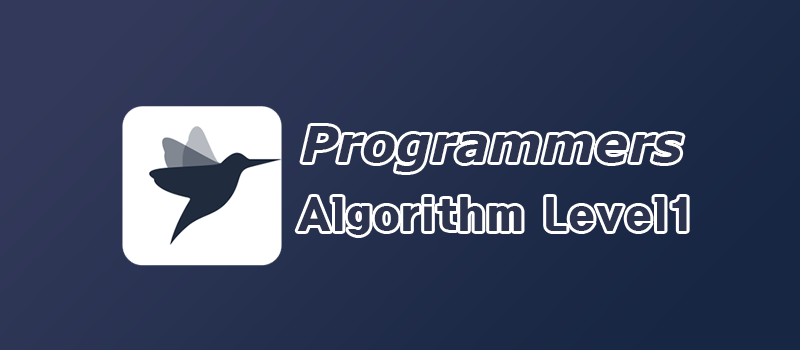
<style>
.page{position:relative;width:800px;height:350px}
.page>*{position:absolute;margin:0}
.t1{font:50px "Verdana-BoldItalic";color:#2b334e}
.t2{font:38px "HeadlineR-HM";color:#2b334e}
</style>
<div class="page">
<p class="t1" style="left:302px;top:126px;width:381px;height:46px">Programmers</p>
<p class="t2" style="left:297px;top:197px;width:390px;height:38px">Algorithm Level1</p>
</div>
